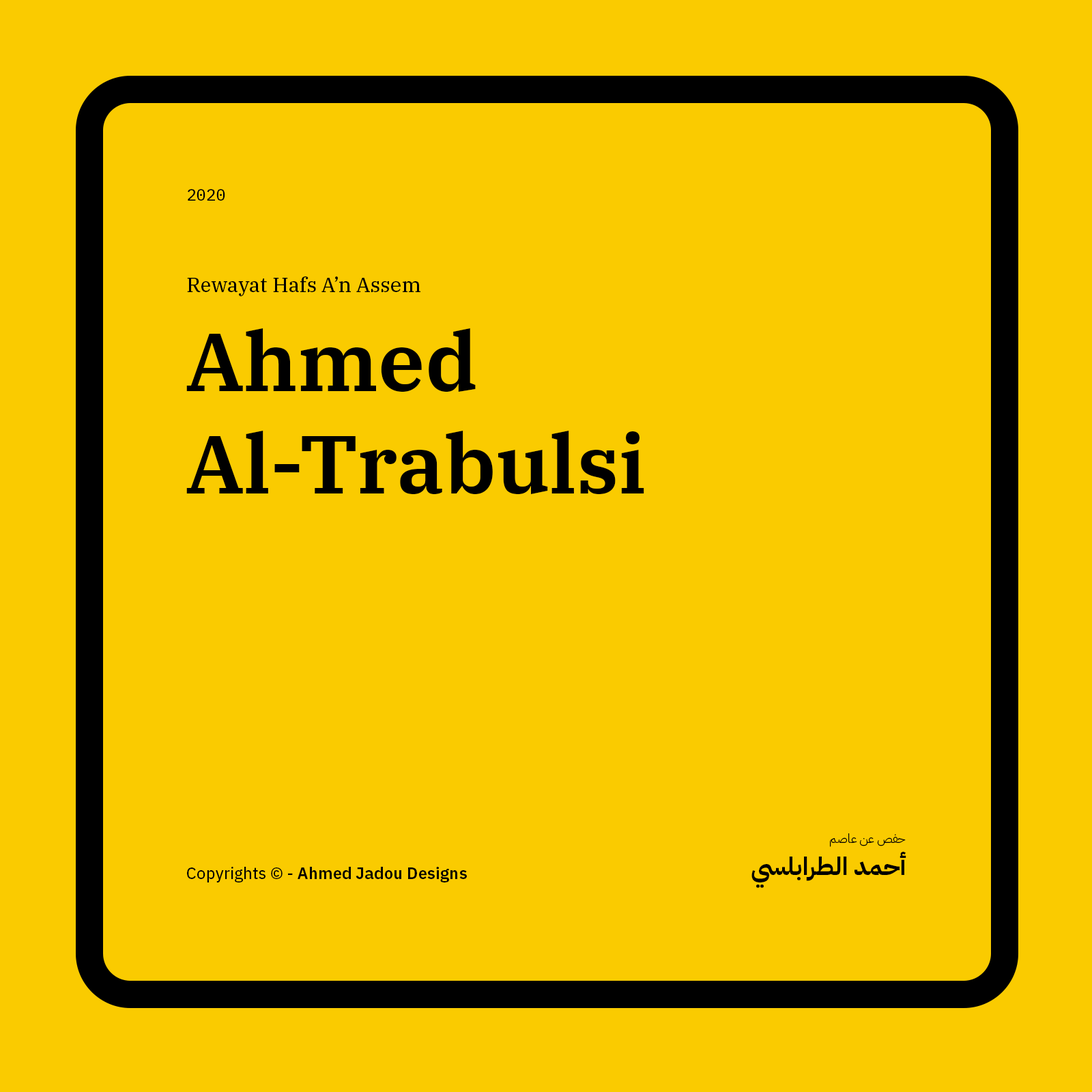
<style>
.page{position:relative;width:1092px;height:1092px;background:#facb00}
.page>*{position:absolute;margin:0}
.t1{font:16.4px "IBMPlexMono-Text";color:#000000}
.t2{font:20.5px "IBMPlexSerif-Text";color:#000000}
.t3{font:81.9px/102.7px "IBMPlexSerif-SemiBold";color:#000000}
.t4{font:12.3px "IBMPlexArabic-Light";color:#000000}
.t5{font:24.6px "IBMPlexArabic-Bold";color:#000000}
.t6{font:16.4px "IBMPlexSans-SemiBold";color:#000000}
.t7{font:16.4px "IBMPlexSans-Text";color:#000000}
</style>
<div class="page">
<p class="t1" style="left:188px;top:189px;width:37px;height:12px">2020</p>
<p class="t2" style="left:187px;top:276px;width:233px;height:20px">Rewayat Hafs A’n Assem</p>
<p class="t3" style="left:186px;top:328px;width:458px;height:166px">Ahmed Al-Trabulsi</p>
<p class="t4" style="left:830px;top:833px;width:76px;height:14px">حفص عن عاصم</p>
<p class="t5" style="left:751px;top:852px;width:155px;height:36px">أحمد الطرابلسي</p>
<p class="t6" style="left:187px;top:867px;width:280px;height:15px"><span class="t7">Copyrights © - </span>Ahmed Jadou Designs</p>
</div>
